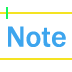
<style>
.page{position:relative;width:72px;height:72px;background:#ffffff}
.page>*{position:absolute;margin:0}
.t1{font:30px "FranklinGothic-Medium";color:#3da5ee}
</style>
<div class="page">
<p class="t1" style="left:8px;top:26px;width:58px;height:21px">Note</p>
</div>
